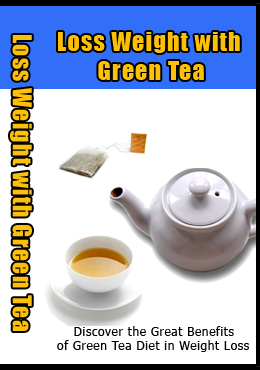
<style>
.page{position:relative;width:260px;height:370px;background:#ffffff}
.page>*{position:absolute;margin:0}
.t1{font:24px "Impact";letter-spacing:0.05em;color:#fcc008}
.t2{font:12px "Tahoma";letter-spacing:0.05em;color:#000000}
</style>
<div class="page">
<p class="t1" style="left:10px;top:35px;width:22px;height:296px;rotate:90deg">Loss Weight with Green Tea</p>
<p class="t1" style="left:58px;top:32px;width:182px;height:48px;text-align:center">Loss Weight with <br>Green Tea</p>
<p class="t2" style="left:57px;top:326px;width:192px;height:26px;text-align:center">Discover the Great Benefits<br>of Green Tea Diet in Weight Loss</p>
</div>
